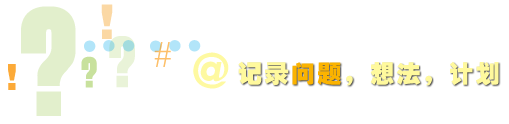
<style>
.page{position:relative;width:509px;height:124px;background:#ffffff}
.page>*{position:absolute;margin:0}
.t1{font:128px "FZCCHJW--GB1-0";letter-spacing:0.1em;color:#e2efcc}
.t2{font:48px "FZCCHJW--GB1-0";letter-spacing:0.1em;color:#fbd8a4}
.t3{font:60px "FZCCHJW--GB1-0";letter-spacing:0.1em;color:#b2e5f9}
.t4{font:60px "FZCCHJW--GB1-0";letter-spacing:0.1em;color:#e9f3d8}
.t5{font:36px "TimesNewRomanPSMT";letter-spacing:0.1em;color:#fdbf69}
.t6{font:48px "FZCCHJW--GB1-0";letter-spacing:0.1em;color:#fef9a1}
.t7{font:36px "FZCCHJW--GB1-0";letter-spacing:0.1em;color:#fcaa38}
.t8{font:36px "FZCCHJW--GB1-0";letter-spacing:0.1em;color:#c8e19d}
.t9{font:24px "FZCCHJW--GB1-0";letter-spacing:0.1em;color:#fff99d}
.t10{font:24px "FZCCHJW--GB1-0";letter-spacing:0.1em;color:#fbb300}
</style>
<div class="page">
<p class="t1" style="left:21px;top:6px;width:55px;height:110px">？</p>
<p class="t2" style="left:101px;top:4px;width:12px;height:35px">!</p>
<p class="t3" style="left:84px;top:40px;width:117px;height:12px">……</p>
<p class="t4" style="left:109px;top:36px;width:26px;height:52px">？</p>
<p class="t5" style="left:154px;top:42px;width:17px;height:25px">#</p>
<p class="t6" style="left:193px;top:52px;width:36px;height:37px">@</p>
<p class="t7" style="left:8px;top:64px;width:8px;height:26px">!</p>
<p class="t8" style="left:81px;top:56px;width:16px;height:32px">？</p>
<p class="t9" style="left:238px;top:61px;width:261px;height:25px">记录<span class="t10">问题</span>，想法，计划</p>
</div>
